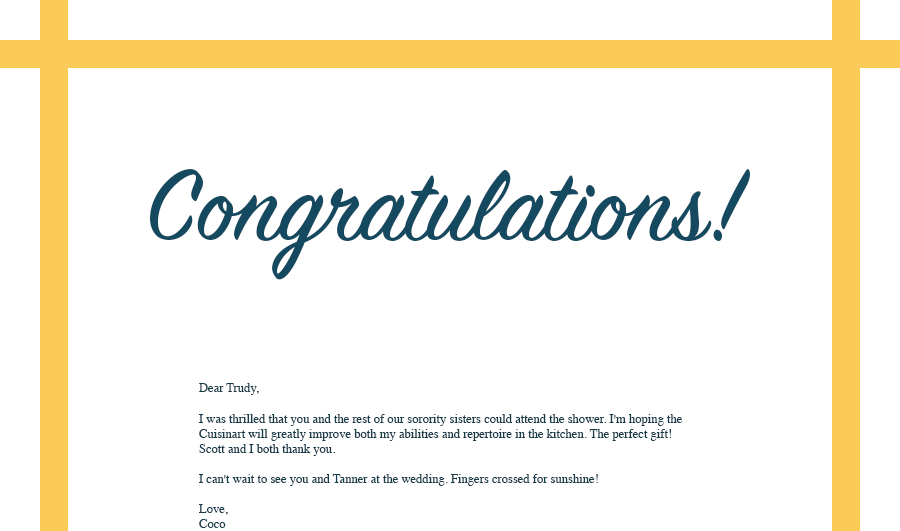
<style>
.page{position:relative;width:900px;height:531px;background:#ffffff}
.page>*{position:absolute;margin:0}
.t1{font:111.1px "SignPainter-HouseScript";color:#144960}
.t2{font:12.6px "Times-Roman";color:#183b4a}
</style>
<div class="page">
<p class="t1" style="left:150px;top:169px;width:600px;height:111px">Congratulations!</p>
<p class="t2" style="left:199px;top:383px;width:483px;height:145px">Dear Trudy,<br><br>I was thrilled that you and the rest of our sorority sisters could attend the shower. I'm hoping the Cuisinart will greatly improve both my abilities and repertoire in the kitchen. The perfect gift! Scott and I both thank you.<br><br>I can't wait to see you and Tanner at the wedding. Fingers crossed for sunshine!<br><br>Love,<br>Coco</p>
</div>
